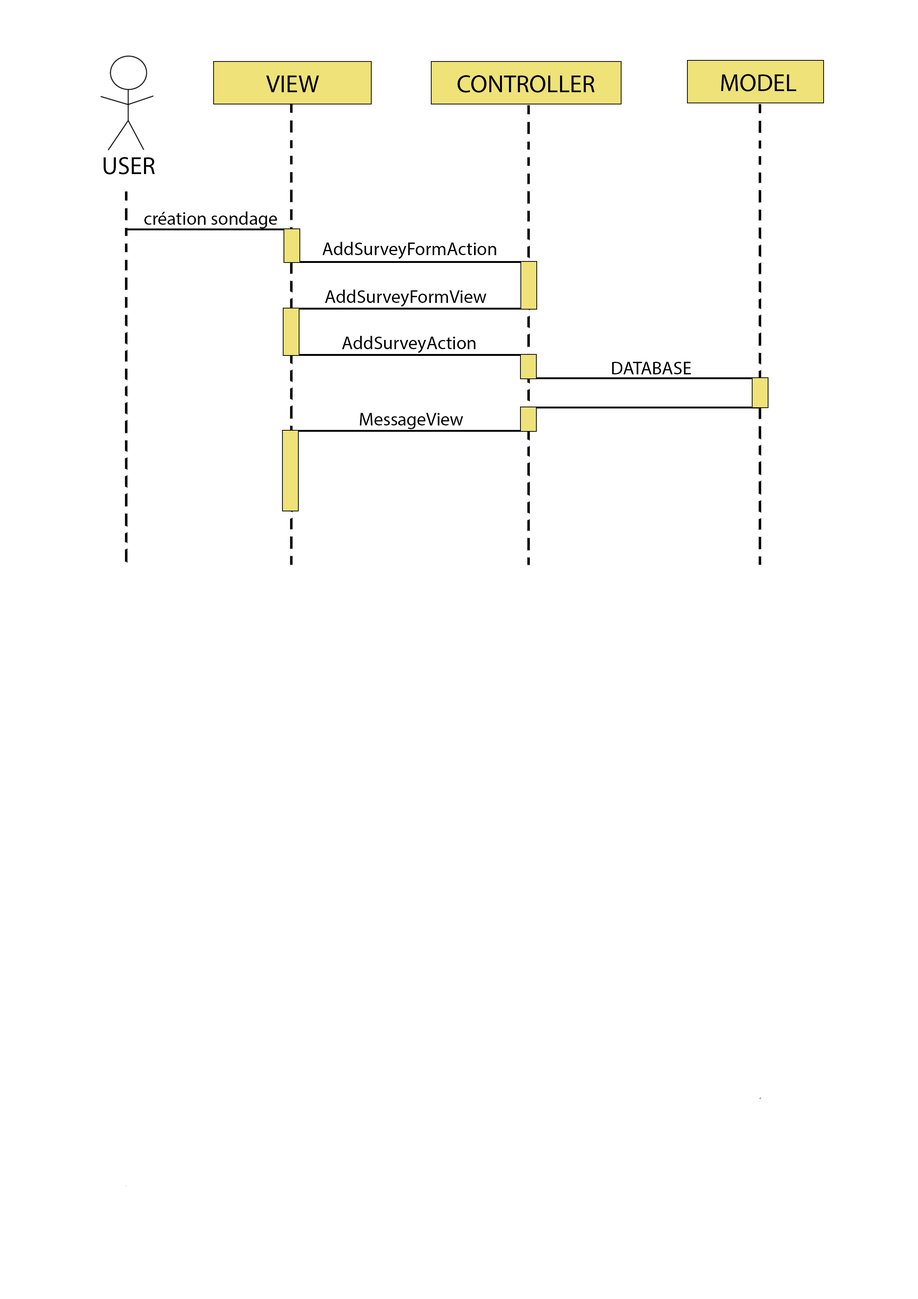
<style>
.page{position:relative;width:918px;height:1299px;background:#ffffff}
.page>*{position:absolute;margin:0}
.t1{font:24.7px "MyriadPro-Regular";color:#000000}
.t2{font:18.5px "MyriadPro-Regular";color:#000000}
</style>
<div class="page">
<p class="t1" style="left:266px;top:76px;width:53px;height:16px">VIEW</p>
<p class="t1" style="left:458px;top:75px;width:137px;height:18px">CONTROLLER</p>
<p class="t1" style="left:721px;top:74px;width:75px;height:17px">MODEL</p>
<p class="t1" style="left:104px;top:157px;width:51px;height:17px">USER</p>
<p class="t2" style="left:144px;top:211px;width:133px;height:17px">création sondage</p>
<p class="t2" style="left:322px;top:242px;width:174px;height:17px">AddSurveyFormAction</p>
<p class="t2" style="left:325px;top:290px;width:161px;height:17px">AddSurveyFormView</p>
<p class="t2" style="left:342px;top:336px;width:134px;height:17px">AddSurveyAction</p>
<p class="t2" style="left:612px;top:362px;width:79px;height:12px">DATABASE</p>
<p class="t2" style="left:360px;top:413px;width:103px;height:16px">MessageView</p>
</div>
